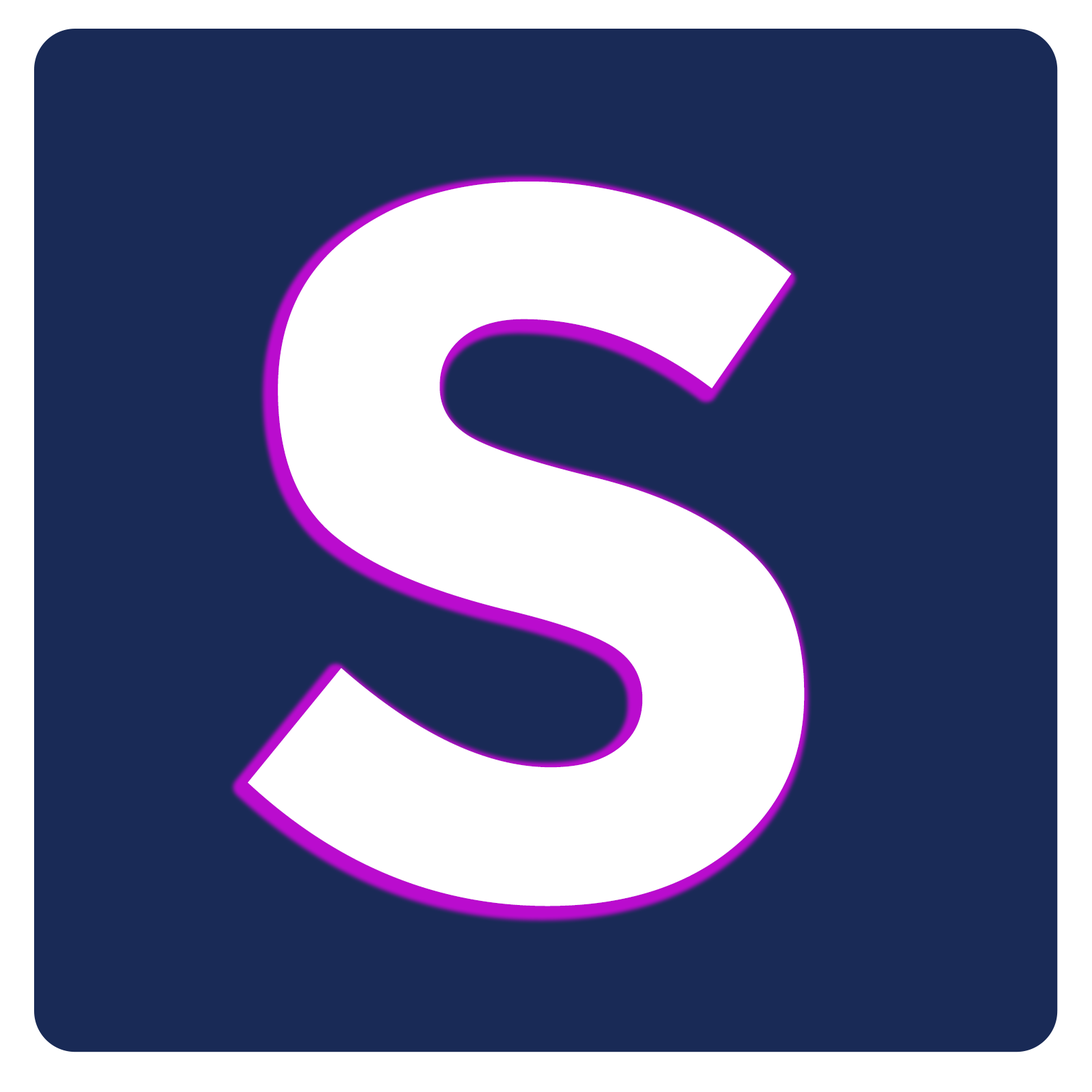
<style>
.page{position:relative;width:1092px;height:1092px;background:#192a56}
.page>*{position:absolute;margin:0}
.t1{font:1001.4px "Montserrat-Bold";color:#ffffff;font-weight:bold}
</style>
<div class="page">
<p class="t1" style="left:248px;top:182px;width:557px;height:724px">S</p>
</div>
